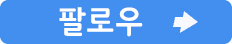
<style>
.page{position:relative;width:232px;height:44px;background:#428fef}
.page>*{position:absolute;margin:0}
.t1{font:32px "12LotteMartDreamBold";letter-spacing:0.05em;color:#ffffff;text-transform:uppercase;scale:0.95 1}
</style>
<div class="page">
<p class="t1" style="left:59px;top:7px;width:84px;height:30px">팔로우</p>
</div>
